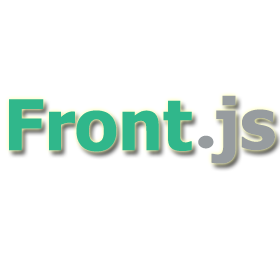
<style>
.page{position:relative;width:280px;height:280px;background:#ffffff}
.page>*{position:absolute;margin:0}
.t1{font:70px "Tahoma-Bold";color:#30b78b}
.t2{font:70px "Tahoma-Bold";color:#979c9f}
.t3{font:93.3px "ComicSansMS-Bold";color:#979c9f}
</style>
<div class="page">
<p class="t1" style="left:9px;top:99px;width:183px;height:53px">Front</p>
<p class="t2" style="left:211px;top:95px;width:64px;height:69px">js</p>
<p class="t3" style="left:198px;top:135px;width:16px;height:14px">.</p>
</div>
